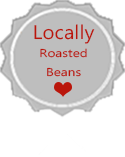
<style>
.page{position:relative;width:125px;height:157px;background:#ffffff}
.page>*{position:absolute;margin:0}
.t1{font:11.1px/18.5px "MicrosoftPhagsPa";letter-spacing:0.003em;color:#ba160b;scale:1.22 1}
.t2{font:19.5px "MicrosoftPhagsPa";letter-spacing:0.005em;color:#ba160b;scale:1.04 1}
</style>
<div class="page">
<p class="t1" style="left:34px;top:24px;width:61px;height:53px;text-align:center"><span class="t2">Locally<br></span>Roasted<br>Beans</p>
</div>
